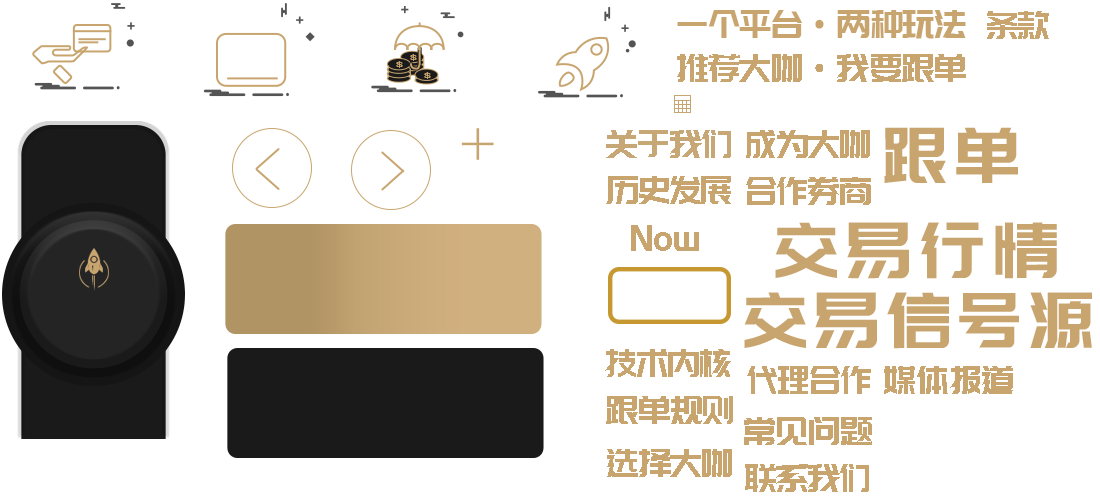
<style>
.page{position:relative;width:1100px;height:500px;background:#ffffff}
.page>*{position:absolute;margin:0}
.t1{font:38.5px "PangMenZhengDao";letter-spacing:-0.02em;color:#c8a56f;scale:0.91 1}
.t2{font:7.1px "PingFangSC-Regular";color:#c8a56f;scale:1.62 1}
.t3{font:62px "PingFangSC-Thin";color:#c8a56f}
.t4{font:38.5px "PangMenZhengDao";letter-spacing:-0.02em;color:#c6a775;scale:0.91 1}
.t5{font:76.8px "PangMenZhengDao";letter-spacing:0.1em;color:#c8a56f;scale:0.91 1}
.t6{font:77px "PangMenZhengDao";letter-spacing:0.1em;color:#c8a56f;scale:0.91 1}
</style>
<div class="page">
<p class="t1" style="left:677px;top:10px;width:289px;height:29px">一个平台·两种玩法</p>
<p class="t1" style="left:987px;top:11px;width:62px;height:28px">条款</p>
<p class="t2" style="left:410px;top:54px;width:7px;height:7px">$</p>
<p class="t1" style="left:677px;top:54px;width:289px;height:28px">推荐大咖·我要跟单</p>
<p class="t2" style="left:396px;top:61px;width:7px;height:7px">$</p>
<p class="t2" style="left:424px;top:72px;width:7px;height:7px">$</p>
<p class="t3" style="left:461px;top:128px;width:33px;height:32px">+</p>
<p class="t4" style="left:606px;top:130px;width:125px;height:28px">关于我们</p>
<p class="t1" style="left:746px;top:130px;width:124px;height:28px">成为大咖</p>
<p class="t5" style="left:884px;top:127px;width:134px;height:56px">跟单</p>
<p class="t1" style="left:606px;top:176px;width:125px;height:28px">历史发展</p>
<p class="t1" style="left:746px;top:177px;width:125px;height:28px">合作券商</p>
<p class="t5" style="left:775px;top:222px;width:282px;height:57px">交易行情</p>
<p class="t1" style="left:631px;top:225px;width:68px;height:26px">Now</p>
<p class="t6" style="left:744px;top:292px;width:348px;height:57px">交易信号源</p>
<p class="t1" style="left:605px;top:349px;width:126px;height:28px">技术内核</p>
<p class="t1" style="left:747px;top:366px;width:124px;height:28px">代理合作</p>
<p class="t1" style="left:884px;top:366px;width:129px;height:28px">媒体报道</p>
<p class="t1" style="left:606px;top:396px;width:127px;height:28px">跟单规则</p>
<p class="t1" style="left:744px;top:417px;width:128px;height:28px">常见问题</p>
<p class="t1" style="left:607px;top:449px;width:125px;height:28px">选择大咖</p>
<p class="t1" style="left:745px;top:464px;width:124px;height:28px">联系我们</p>
</div>
